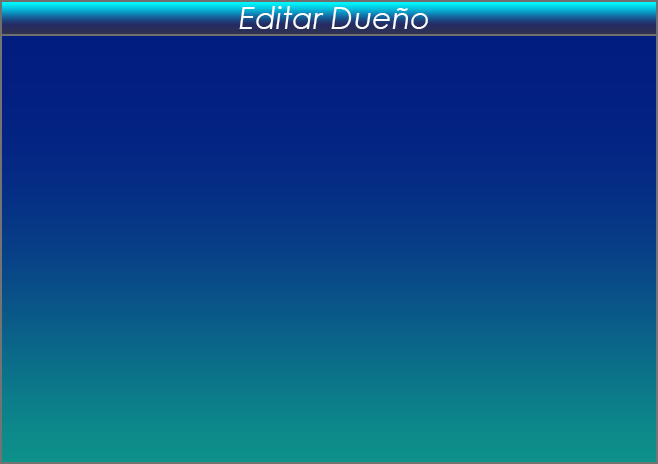
<style>
.page{position:relative;width:658px;height:464px}
.page>*{position:absolute;margin:0}
.t1{font:12px "CenturyGothic-Italic";color:#fdfdfd}
</style>
<div class="page">
<p class="t1" style="left:239px;top:6px;width:189px;height:23px">Editar Dueño</p>
</div>
